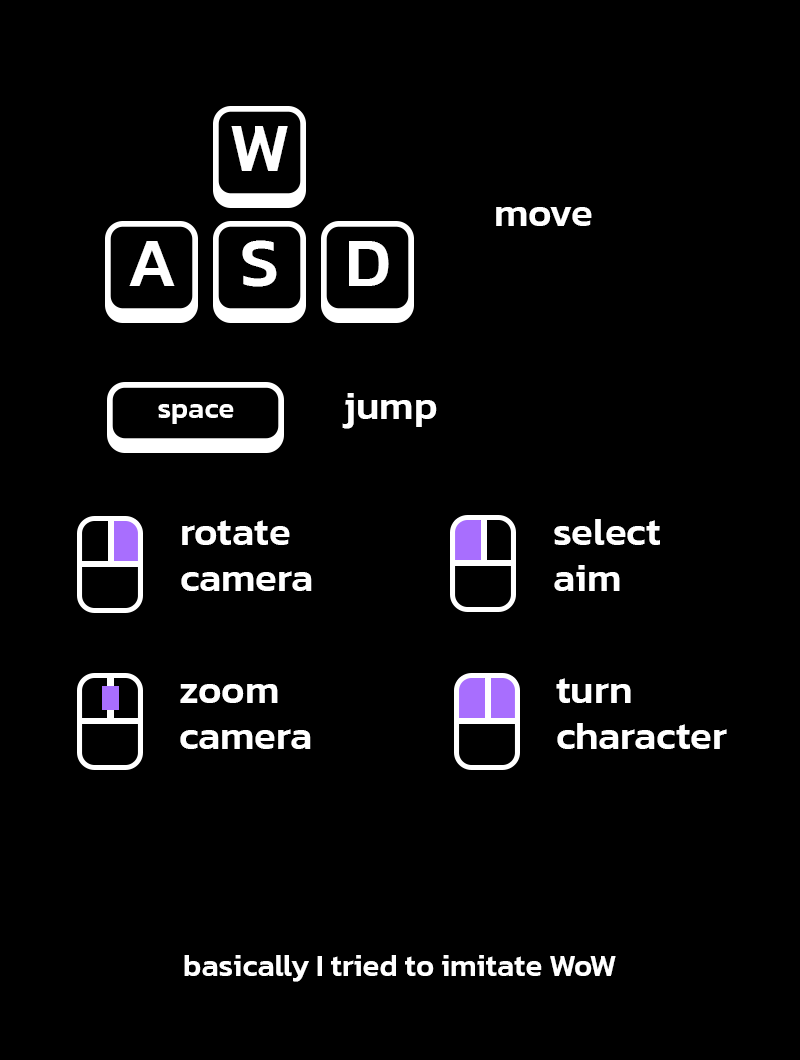
<style>
.page{position:relative;width:800px;height:1060px;background:#000000}
.page>*{position:absolute;margin:0}
.t1{font:70px "Kanit-Medium";color:#ffffff}
.t2{font:40px "Kanit-Medium";color:#ffffff}
.t3{font:29px "Kanit-Medium";color:#ffffff}
.t4{font:40px/46px "Kanit-Medium";color:#ffffff}
.t5{font:31px "Kanit-Medium";color:#ffffff}
</style>
<div class="page">
<p class="t1" style="left:231px;top:126px;width:57px;height:45px">W</p>
<p class="t2" style="left:496px;top:207px;width:96px;height:19px">move</p>
<p class="t1" style="left:129px;top:241px;width:46px;height:45px">A</p>
<p class="t1" style="left:242px;top:240px;width:35px;height:47px">S</p>
<p class="t1" style="left:349px;top:241px;width:40px;height:45px">D</p>
<p class="t2" style="left:342px;top:393px;width:95px;height:36px">jump</p>
<p class="t3" style="left:158px;top:404px;width:76px;height:20px">space</p>
<p class="t4" style="left:181px;top:520px;width:131px;height:71px">rotate<br>camera</p>
<p class="t4" style="left:554px;top:519px;width:106px;height:72px">select<br>aim</p>
<p class="t4" style="left:556px;top:678px;width:171px;height:71px">turn<br>character</p>
<p class="t4" style="left:180px;top:684px;width:131px;height:65px">zoom<br>camera</p>
<p class="t5" style="left:184px;top:955px;width:432px;height:27px">basically I tried to imitate WoW</p>
</div>
